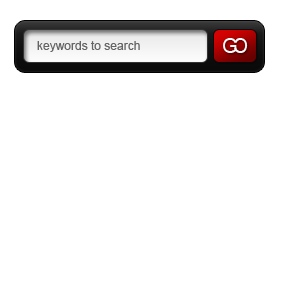
<style>
.page{position:relative;width:282px;height:282px;background:#ffffff}
.page>*{position:absolute;margin:0}
.t1{font:12px "ArialMT";color:#646464}
</style>
<div class="page">
<p class="t1" style="left:37px;top:41px;width:103px;height:11px">keywords to search</p>
</div>
